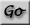
<style>
.page{position:relative;width:30px;height:25px;background:#cccccc}
.page>*{position:absolute;margin:0}
.t1{font:14px "LucidaHandwriting-Italic";color:#000000}
</style>
<div class="page">
<p class="t1" style="left:4px;top:5px;width:23px;height:13px">Go</p>
</div>
